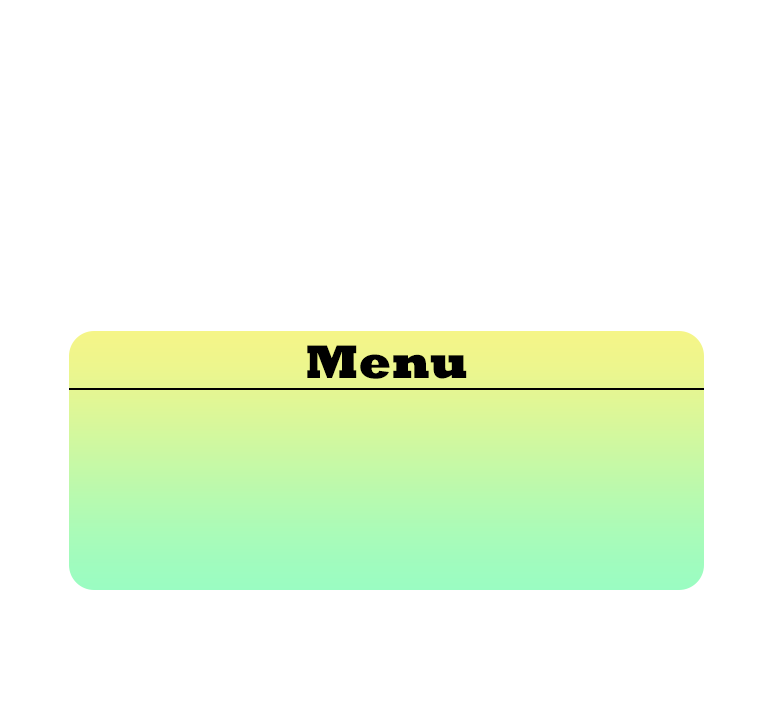
<style>
.page{position:relative;width:773px;height:724px;background:#ffffff}
.page>*{position:absolute;margin:0}
.t1{font:48px "Rockwell-ExtraBold";color:#000000}
</style>
<div class="page">
<p class="t1" style="left:307px;top:345px;width:160px;height:34px">Menu</p>
</div>
